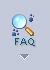
<style>
.page{position:relative;width:50px;height:70px;background:#c4cad9}
.page>*{position:absolute;margin:0}
.t1{font:9.8px "LucidaSansUnicode";letter-spacing:0.05em;color:#045975}
</style>
<div class="page">
<p class="t1" style="left:15px;top:38px;width:20px;height:8px">FAQ</p>
</div>
